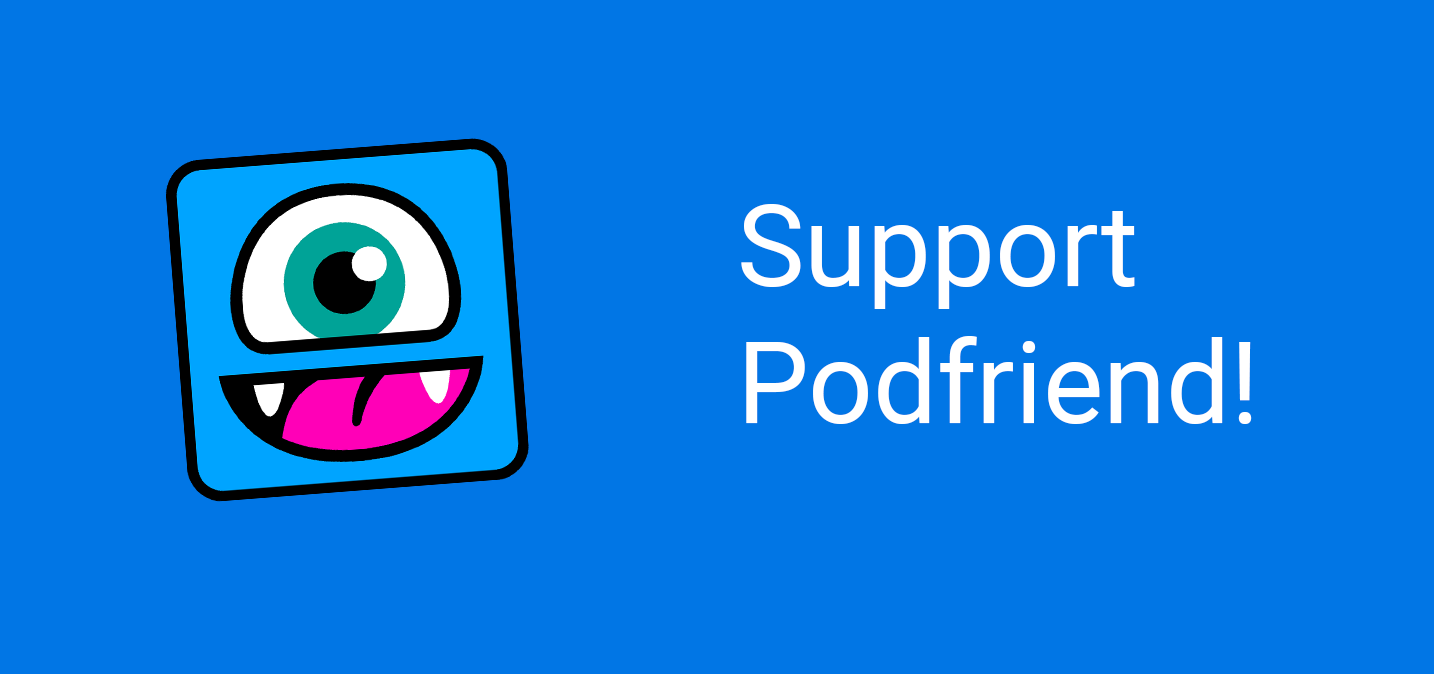
<style>
.page{position:relative;width:1434px;height:674px;background:#0176e5}
.page>*{position:absolute;margin:0}
.t1{font:113.9px "Roboto-Regular";color:#ffffff}
</style>
<div class="page">
<p class="t1" style="left:741px;top:204px;width:511px;height:220px">Support<br>Podfriend!</p>
</div>
